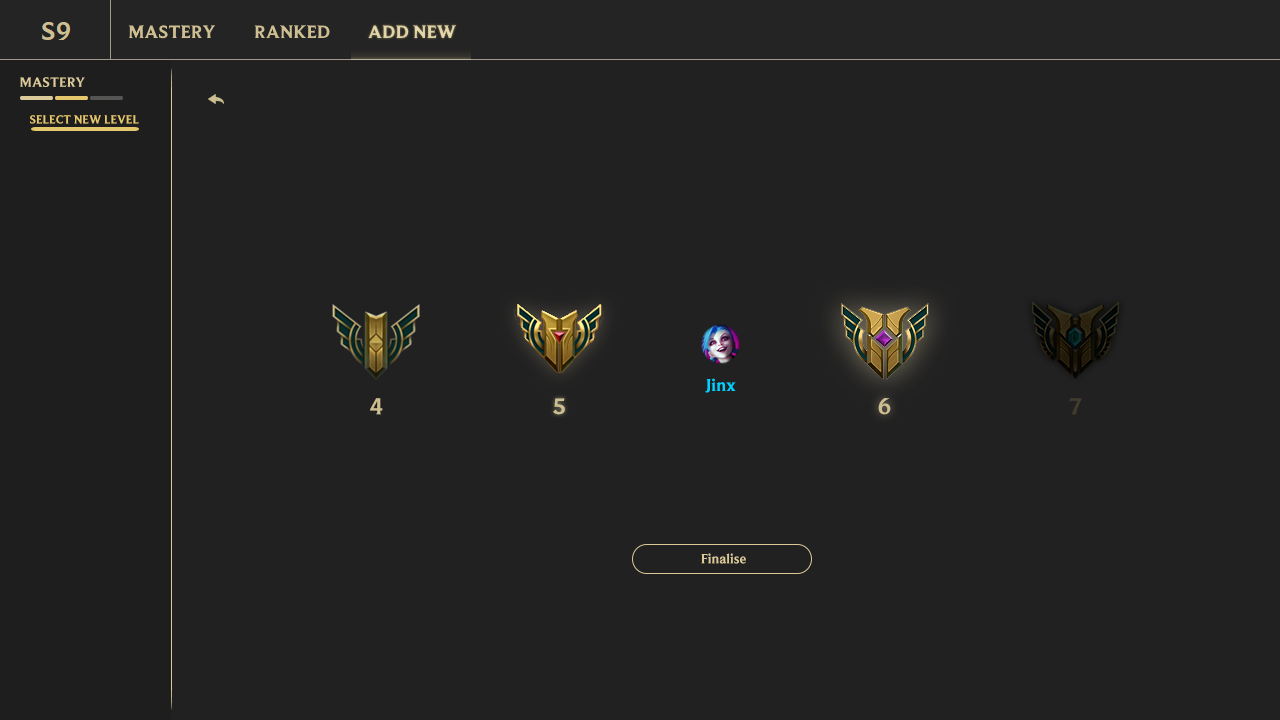
<style>
.page{position:relative;width:1280px;height:720px;background:#212121}
.page>*{position:absolute;margin:0}
.t1{font:14px "BeaufortforLOL-Bold";color:#daca9a}
.t2{font:12px "BeaufortforLOL-Bold";color:#e4c66c}
.t3{font:18.1px "BeaufortforLOL-Bold";color:#00d2ff}
.t4{font:24px "BeaufortforLOL-Bold";letter-spacing:0.025em;color:#cdbe91}
.t5{font:24px "BeaufortforLOL-Bold";letter-spacing:0.025em;color:#413c2e}
</style>
<div class="page">
<p class="t1" style="left:20px;top:77px;width:65px;height:10px">MASTERY</p>
<p class="t2" style="left:30px;top:115px;width:109px;height:9px">SELECT NEW LEVEL</p>
<p class="t3" style="left:705px;top:378px;width:31px;height:15px">Jinx</p>
<p class="t4" style="left:370px;top:398px;width:13px;height:17px">4</p>
<p class="t4" style="left:553px;top:398px;width:12px;height:17px">5</p>
<p class="t4" style="left:878px;top:398px;width:13px;height:17px">6</p>
<p class="t5" style="left:1069px;top:398px;width:13px;height:17px">7</p>
<p class="t1" style="left:701px;top:553px;width:45px;height:11px">Finalise</p>
</div>
